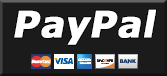
<style>
.page{position:relative;width:167px;height:76px;background:#1b1b1b}
.page>*{position:absolute;margin:0}
.t1{font:36px "Verdana-Bold";color:#ffffff;font-weight:bold;font-style:italic}
</style>
<div class="page">
<p class="t1" style="left:14px;top:9px;width:142px;height:36px">PayPal</p>
</div>
